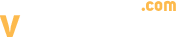
<style>
.page{position:relative;width:180px;height:40px;background:#ffffff}
.page>*{position:absolute;margin:0}
.t1{font:18.4px "Uni-Sans-Bold";color:#fdba4d}
.t2{font:41.2px "Uni-Sans-Bold";color:#fdba4d}
</style>
<div class="page">
<p class="t1" style="left:141px;top:0px;width:35px;height:11px">.com</p>
<p class="t2" style="left:0px;top:15px;width:21px;height:22px">v</p>
</div>
